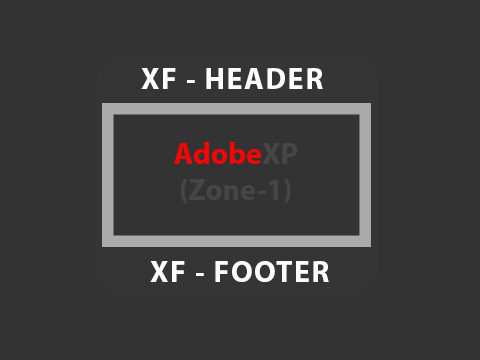
<style>
.page{position:relative;width:480px;height:360px;background:#333333}
.page>*{position:absolute;margin:0}
.t1{font:30px "MyriadPro-Bold";letter-spacing:0.05em;color:#fdfcfc}
.t2{font:30px "MyriadPro-Bold";color:#474646}
.t3{font:30px "MyriadPro-Bold";color:#fb0303}
</style>
<div class="page">
<p class="t1" style="left:141px;top:68px;width:182px;height:21px">XF - HEADER</p>
<p class="t2" style="left:174px;top:142px;width:123px;height:62px;text-align:center"><span class="t3">Adobe</span>XP<br>(Zone-1)</p>
<p class="t1" style="left:150px;top:261px;width:179px;height:21px">XF - FOOTER</p>
</div>
